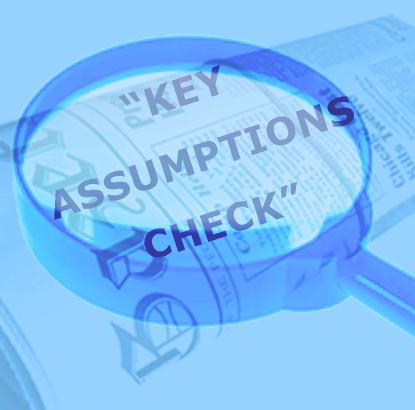
<style>
.page{position:relative;width:415px;height:410px;background:#97d2ff}
.page>*{position:absolute;margin:0}
.t1{font:37.9px/34.1px "Verdana-Bold";letter-spacing:0.01em;color:#739bcb}
</style>
<div class="page">
<p class="t1" style="left:54px;top:65px;width:300px;height:193px;text-align:center;rotate:-18deg">“KEY <br><br>ASSUMPTIONS<br><br> CHECK”</p>
</div>
